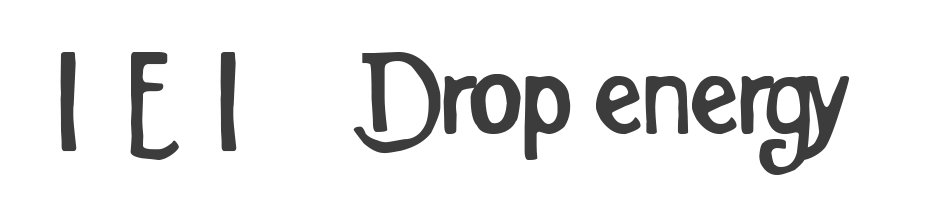
<style>
.page{position:relative;width:929px;height:215px;background:#ffffff}
.page>*{position:absolute;margin:0}
.t1{font:128.8px "BackToTheFantasy";color:#3c3c3c;scale:1.32 1}
</style>
<div class="page">
<p class="t1" style="left:60px;top:52px;width:790px;height:123px">I  E  I     Drop energy</p>
</div>
